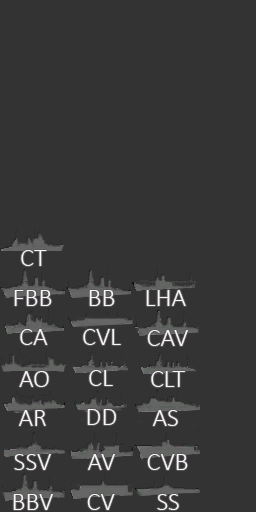
<style>
.page{position:relative;width:256px;height:512px;background:#333333}
.page>*{position:absolute;margin:0}
.t1{font:26px "Calibri-Light";color:#f7f3f7}
</style>
<div class="page">
<p class="t1" style="left:21px;top:250px;width:26px;height:16px">CT</p>
<p class="t1" style="left:14px;top:290px;width:38px;height:16px">FBB</p>
<p class="t1" style="left:89px;top:290px;width:26px;height:16px">BB</p>
<p class="t1" style="left:146px;top:290px;width:40px;height:16px">LHA</p>
<p class="t1" style="left:20px;top:329px;width:28px;height:16px">CA</p>
<p class="t1" style="left:83px;top:329px;width:38px;height:16px">CVL</p>
<p class="t1" style="left:147px;top:330px;width:41px;height:16px">CAV</p>
<p class="t1" style="left:19px;top:371px;width:30px;height:16px">AO</p>
<p class="t1" style="left:89px;top:370px;width:24px;height:16px">CL</p>
<p class="t1" style="left:151px;top:371px;width:34px;height:16px">CLT</p>
<p class="t1" style="left:19px;top:410px;width:27px;height:16px">AR</p>
<p class="t1" style="left:87px;top:409px;width:29px;height:16px">DD</p>
<p class="t1" style="left:153px;top:410px;width:25px;height:16px">AS</p>
<p class="t1" style="left:14px;top:454px;width:37px;height:16px">SSV</p>
<p class="t1" style="left:88px;top:454px;width:27px;height:16px">AV</p>
<p class="t1" style="left:147px;top:454px;width:41px;height:16px">CVB</p>
<p class="t1" style="left:13px;top:494px;width:40px;height:16px">BBV</p>
<p class="t1" style="left:87px;top:494px;width:28px;height:16px">CV</p>
<p class="t1" style="left:157px;top:494px;width:22px;height:16px">SS</p>
</div>
